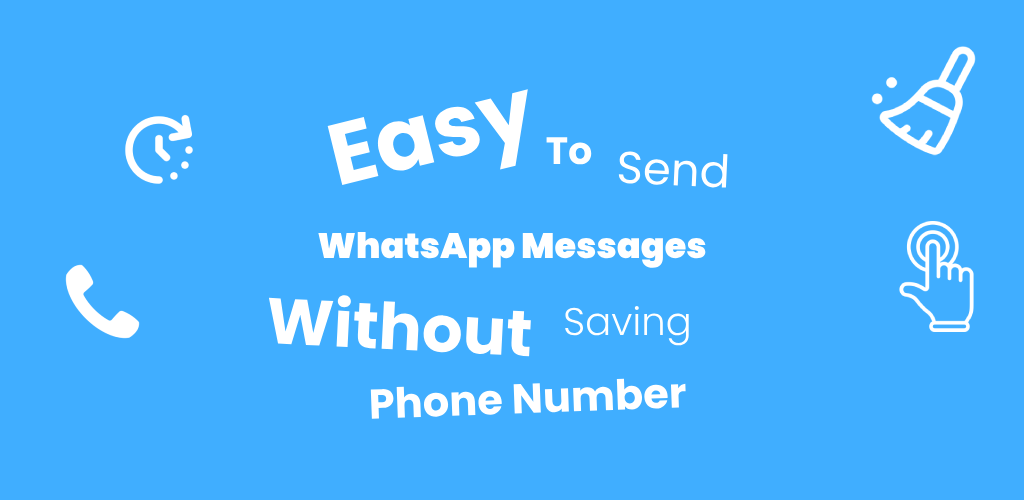
<style>
.page{position:relative;width:1024px;height:500px;background:#40aeff}
.page>*{position:absolute;margin:0}
.t1{font:86.5px "Poppins-Bold";color:#ffffff}
.t2{font:38px "Poppins-Bold";color:#ffffff}
.t3{font:45px "Poppins-Regular";color:#ffffff}
.t4{font:35.2px "Poppins-Black";color:#ffffff}
.t5{font:64.3px "Poppins-Bold";color:#ffffff}
.t6{font:38.6px "Poppins-Light";color:#ffffff}
.t7{font:41.6px "Poppins-Bold";color:#ffffff}
</style>
<div class="page">
<p class="t1" style="left:327px;top:89px;width:201px;height:96px;rotate:-14deg">Easy</p>
<p class="t2" style="left:546px;top:137px;width:46px;height:28px">To</p>
<p class="t3" style="left:618px;top:151px;width:110px;height:37px;rotate:3deg">Send</p>
<p class="t4" style="left:318px;top:231px;width:388px;height:37px">WhatsApp Messages</p>
<p class="t5" style="left:268px;top:295px;width:263px;height:62px;rotate:3deg">Without</p>
<p class="t6" style="left:565px;top:305px;width:124px;height:41px">Saving</p>
<p class="t7" style="left:370px;top:378px;width:316px;height:41px;rotate:-2deg">Phone Number</p>
</div>
